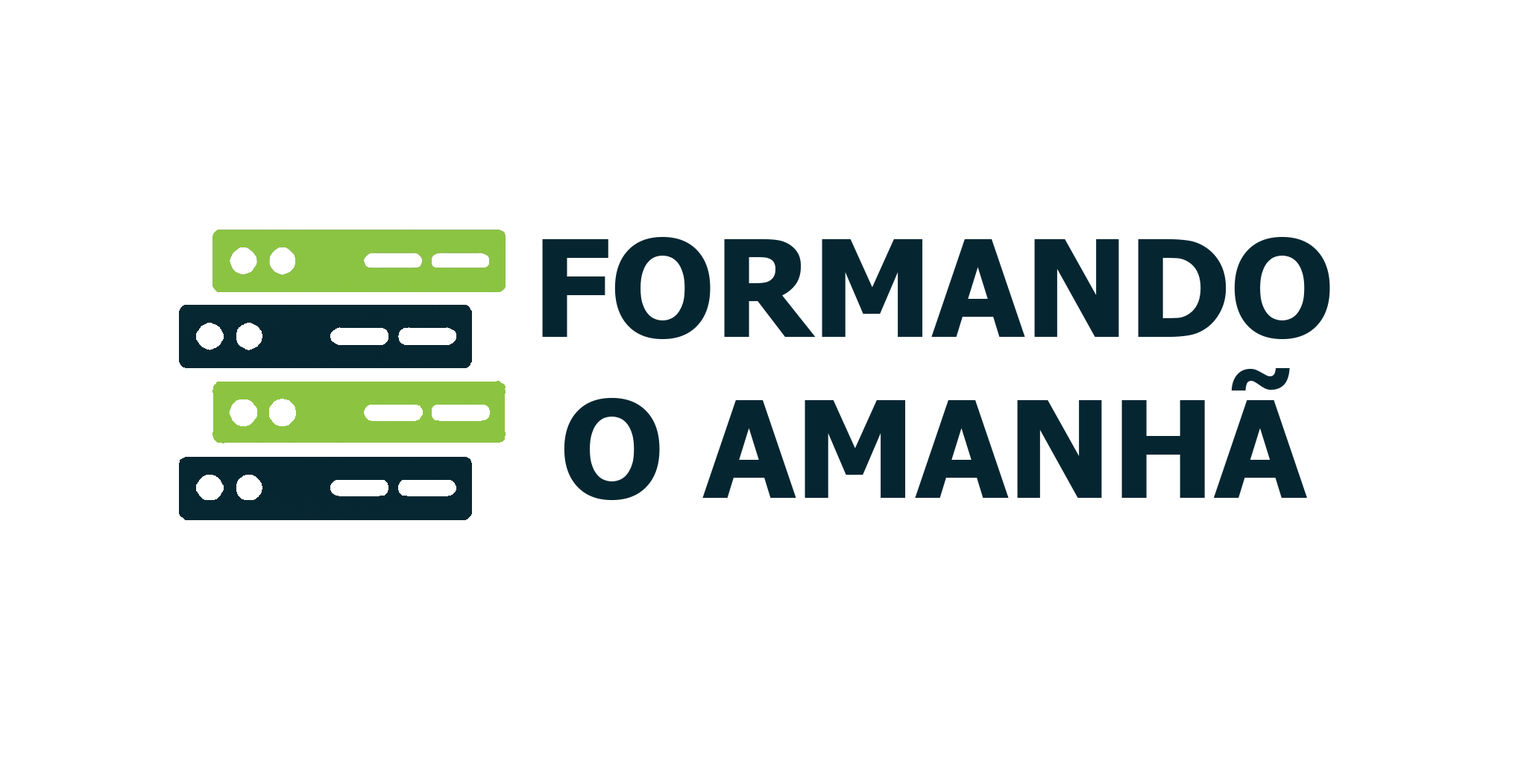
<style>
.page{position:relative;width:1527px;height:781px;background:#ffffff}
.page>*{position:absolute;margin:0}
.t1{font:133.9px "Tahoma-Bold";color:#052631}
</style>
<div class="page">
<p class="t1" style="left:542px;top:236px;width:788px;height:264px;text-align:center">FORMANDO <br>O AMANHÃ</p>
</div>
